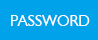
<style>
.page{position:relative;width:98px;height:40px;background:#00a2e9}
.page>*{position:absolute;margin:0}
.t1{font:15.8px "Humanist521BT-Roman";color:#fefefe}
</style>
<div class="page">
<p class="t1" style="left:11px;top:15px;width:79px;height:11px">PASSWORD</p>
</div>
